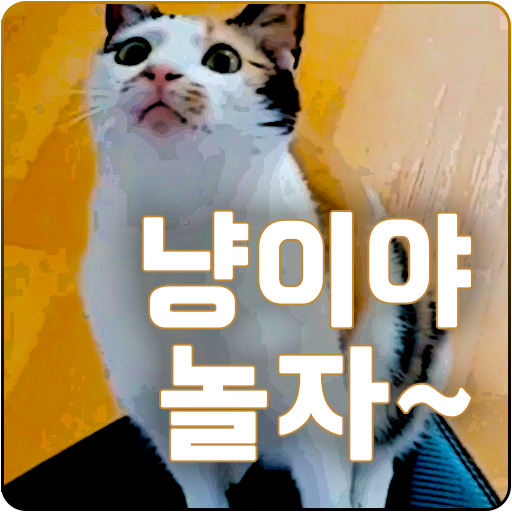
<style>
.page{position:relative;width:512px;height:512px}
.page>*{position:absolute;margin:0}
.t1{font:133.8px/133.8px "BMHANNA11yrsold";color:#ffffff;font-weight:bold}
</style>
<div class="page">
<p class="t1" style="left:143px;top:211px;width:328px;height:250px;text-align:right">냥이야<br>놀자~</p>
</div>
